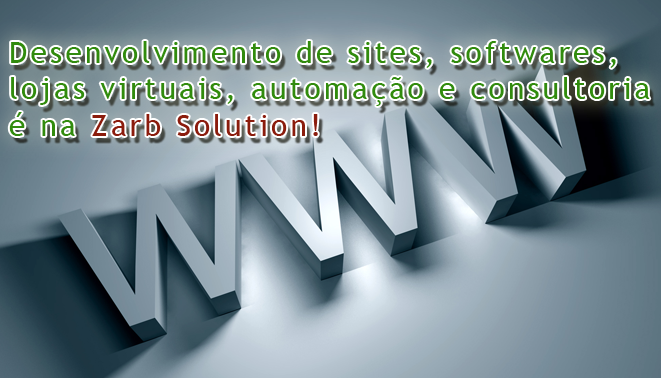
<style>
.page{position:relative;width:661px;height:378px}
.page>*{position:absolute;margin:0}
.t1{font:30.2px "TrebuchetMS";letter-spacing:0.1em;color:#318b0d}
.t2{font:30.2px "TrebuchetMS";letter-spacing:0.1em;color:#8b1c0d}
</style>
<div class="page">
<p class="t1" style="left:9px;top:41px;width:641px;height:95px">Desenvolvimento de sites, softwares, lojas virtuais, automação e consultoria é na <span class="t2">Zarb Solution!</span></p>
</div>
